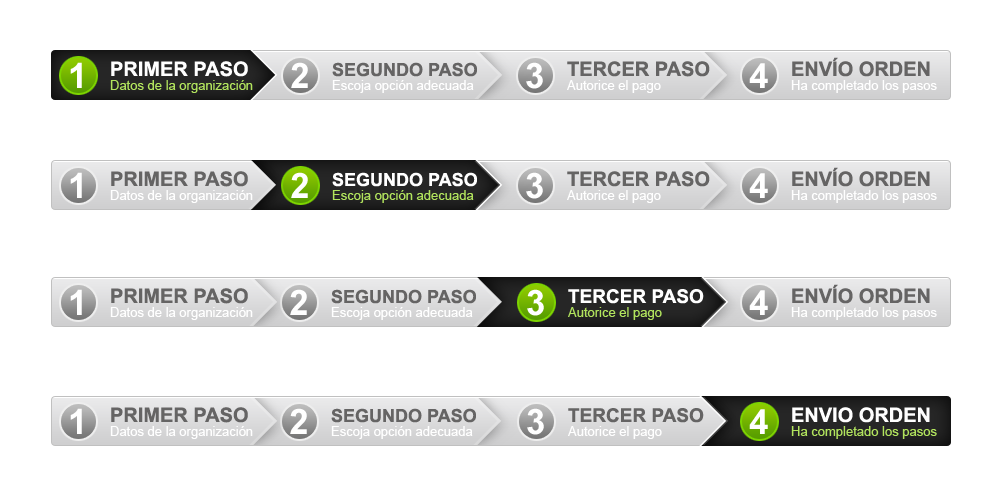
<style>
.page{position:relative;width:1000px;height:500px;background:#ffffff}
.page>*{position:absolute;margin:0}
.t1{font:35px "Arial-BoldMT";letter-spacing:-0.05em;color:#ffffff}
.t2{font:20px "Arial-BoldMT";color:#ffffff;text-transform:uppercase}
.t3{font:18px "Arial-BoldMT";color:#656464;text-transform:uppercase}
.t4{font:20px "Arial-BoldMT";color:#656464;text-transform:uppercase}
.t5{font:13px "ArialMT";color:#b1e35d}
.t6{font:13px "ArialMT";color:#ffffff}
.t7{font:18px "Arial-BoldMT";color:#ffffff;text-transform:uppercase}
.t8{font:19px "Arial-BoldMT";color:#ffffff;text-transform:uppercase}
.t9{font:19px "Arial-BoldMT";color:#656464;text-transform:uppercase}
</style>
<div class="page">
<p class="t1" style="left:70px;top:62px;width:12px;height:26px">1</p>
<p class="t2" style="left:111px;top:61px;width:137px;height:16px">PRIMER PASO</p>
<p class="t1" style="left:291px;top:62px;width:17px;height:26px">2</p>
<p class="t3" style="left:332px;top:62px;width:145px;height:15px">SEGUNDO PASO</p>
<p class="t1" style="left:526px;top:62px;width:17px;height:27px">3</p>
<p class="t4" style="left:567px;top:61px;width:143px;height:16px">TERCER PASO</p>
<p class="t1" style="left:749px;top:63px;width:19px;height:25px">4</p>
<p class="t4" style="left:792px;top:57px;width:138px;height:20px">ENVÍO ORDEN</p>
<p class="t5" style="left:110px;top:80px;width:143px;height:13px">Datos de la organización</p>
<p class="t6" style="left:332px;top:80px;width:142px;height:13px">Escoja opción adecuada</p>
<p class="t6" style="left:567px;top:80px;width:94px;height:13px">Autorice el pago</p>
<p class="t6" style="left:791px;top:80px;width:146px;height:13px">Ha completado los pasos</p>
<p class="t1" style="left:70px;top:172px;width:12px;height:26px">1</p>
<p class="t4" style="left:111px;top:171px;width:137px;height:16px">PRIMER PASO</p>
<p class="t1" style="left:291px;top:172px;width:17px;height:26px">2</p>
<p class="t7" style="left:332px;top:172px;width:145px;height:15px">SEGUNDO PASO</p>
<p class="t1" style="left:526px;top:172px;width:17px;height:27px">3</p>
<p class="t4" style="left:567px;top:171px;width:143px;height:16px">TERCER PASO</p>
<p class="t1" style="left:749px;top:173px;width:19px;height:25px">4</p>
<p class="t4" style="left:792px;top:167px;width:138px;height:20px">ENVÍO ORDEN</p>
<p class="t6" style="left:110px;top:190px;width:143px;height:13px">Datos de la organización</p>
<p class="t5" style="left:332px;top:190px;width:142px;height:13px">Escoja opción adecuada</p>
<p class="t6" style="left:567px;top:190px;width:94px;height:13px">Autorice el pago</p>
<p class="t6" style="left:791px;top:190px;width:146px;height:13px">Ha completado los pasos</p>
<p class="t1" style="left:70px;top:289px;width:12px;height:26px">1</p>
<p class="t4" style="left:111px;top:288px;width:137px;height:16px">PRIMER PASO</p>
<p class="t1" style="left:290px;top:289px;width:17px;height:26px">2</p>
<p class="t3" style="left:331px;top:289px;width:145px;height:15px">SEGUNDO PASO</p>
<p class="t1" style="left:527px;top:289px;width:17px;height:27px">3</p>
<p class="t8" style="left:568px;top:289px;width:136px;height:15px">TERCER PASO</p>
<p class="t1" style="left:749px;top:290px;width:19px;height:25px">4</p>
<p class="t4" style="left:792px;top:284px;width:138px;height:20px">ENVÍO ORDEN</p>
<p class="t6" style="left:110px;top:307px;width:143px;height:13px">Datos de la organización</p>
<p class="t6" style="left:331px;top:307px;width:142px;height:13px">Escoja opción adecuada</p>
<p class="t5" style="left:568px;top:307px;width:94px;height:13px">Autorice el pago</p>
<p class="t6" style="left:791px;top:307px;width:146px;height:13px">Ha completado los pasos</p>
<p class="t1" style="left:70px;top:408px;width:12px;height:26px">1</p>
<p class="t4" style="left:111px;top:407px;width:137px;height:16px">PRIMER PASO</p>
<p class="t1" style="left:290px;top:408px;width:17px;height:26px">2</p>
<p class="t3" style="left:331px;top:408px;width:145px;height:15px">segundo paso</p>
<p class="t1" style="left:527px;top:408px;width:17px;height:27px">3</p>
<p class="t9" style="left:568px;top:408px;width:136px;height:15px">tercer paso</p>
<p class="t1" style="left:749px;top:409px;width:19px;height:25px">4</p>
<p class="t2" style="left:792px;top:407px;width:138px;height:16px">ENVIO ORDEN</p>
<p class="t6" style="left:110px;top:426px;width:143px;height:13px">Datos de la organización</p>
<p class="t6" style="left:331px;top:426px;width:142px;height:13px">Escoja opción adecuada</p>
<p class="t6" style="left:568px;top:426px;width:94px;height:13px">Autorice el pago</p>
<p class="t5" style="left:791px;top:426px;width:146px;height:13px">Ha completado los pasos</p>
</div>
